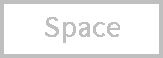
<style>
.page{position:relative;width:163px;height:58px;background:#ffffff}
.page>*{position:absolute;margin:0}
.t1{font:26px "TaipeiSansTCBeta-Light";color:#bfbfbf;font-weight:bold}
</style>
<div class="page">
<p class="t1" style="left:45px;top:17px;width:75px;height:26px">Space</p>
</div>
